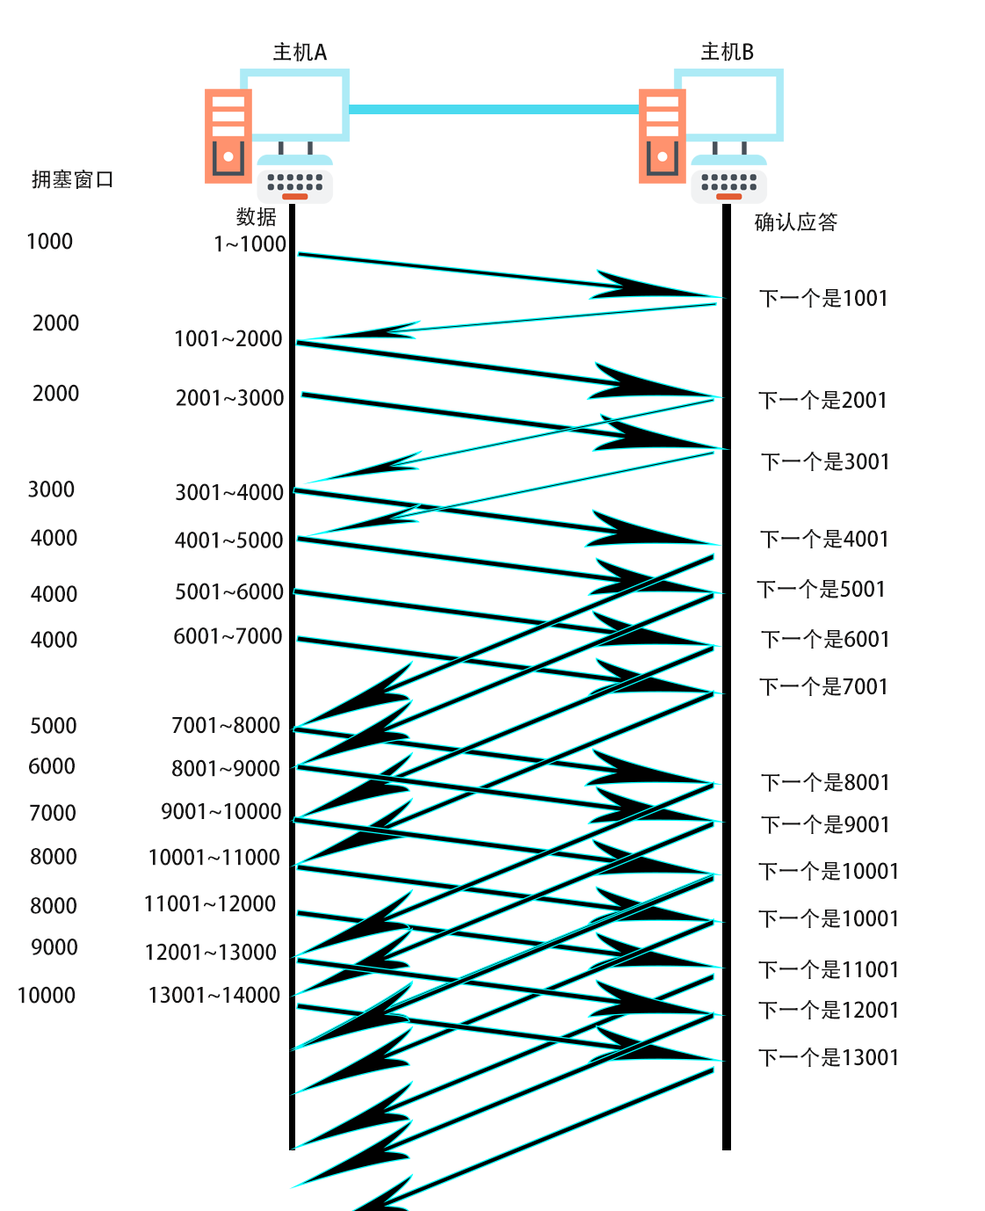
<style>
.page{position:relative;width:985px;height:1211px;background:#ffffff}
.page>*{position:absolute;margin:0}
.t1{font:21.1px "AdobeHeitiStd-Regular";color:#151414}
</style>
<div class="page">
<p class="t1" style="left:273px;top:41px;width:55px;height:21px">主机A</p>
<p class="t1" style="left:701px;top:41px;width:53px;height:21px">主机B</p>
<p class="t1" style="left:32px;top:169px;width:80px;height:20px">拥塞窗口</p>
<p class="t1" style="left:235px;top:206px;width:41px;height:21px">数据</p>
<p class="t1" style="left:754px;top:212px;width:83px;height:20px">确认应答</p>
<p class="t1" style="left:27px;top:232px;width:46px;height:18px">1000</p>
<p class="t1" style="left:214px;top:235px;width:72px;height:17px">1~1000</p>
<p class="t1" style="left:759px;top:287px;width:127px;height:21px">下一个是1001</p>
<p class="t1" style="left:33px;top:314px;width:46px;height:17px">2000</p>
<p class="t1" style="left:175px;top:329px;width:107px;height:18px">1001~2000</p>
<p class="t1" style="left:33px;top:384px;width:46px;height:18px">2000</p>
<p class="t1" style="left:176px;top:389px;width:108px;height:17px">2001~3000</p>
<p class="t1" style="left:758px;top:389px;width:127px;height:20px">下一个是2001</p>
<p class="t1" style="left:761px;top:451px;width:126px;height:20px">下一个是3001</p>
<p class="t1" style="left:28px;top:481px;width:47px;height:16px">3000</p>
<p class="t1" style="left:176px;top:483px;width:108px;height:18px">3001~4000</p>
<p class="t1" style="left:31px;top:529px;width:46px;height:17px">4000</p>
<p class="t1" style="left:175px;top:532px;width:108px;height:16px">4001~5000</p>
<p class="t1" style="left:760px;top:528px;width:127px;height:20px">下一个是4001</p>
<p class="t1" style="left:756px;top:578px;width:127px;height:20px">下一个是5001</p>
<p class="t1" style="left:31px;top:585px;width:46px;height:17px">4000</p>
<p class="t1" style="left:176px;top:583px;width:108px;height:17px">5001~6000</p>
<p class="t1" style="left:174px;top:627px;width:108px;height:17px">6001~7000</p>
<p class="t1" style="left:761px;top:628px;width:126px;height:20px">下一个是6001</p>
<p class="t1" style="left:31px;top:631px;width:46px;height:17px">4000</p>
<p class="t1" style="left:759px;top:676px;width:127px;height:20px">下一个是7001</p>
<p class="t1" style="left:31px;top:717px;width:45px;height:17px">5000</p>
<p class="t1" style="left:172px;top:716px;width:108px;height:18px">7001~8000</p>
<p class="t1" style="left:29px;top:757px;width:46px;height:17px">6000</p>
<p class="t1" style="left:172px;top:759px;width:107px;height:18px">8001~9000</p>
<p class="t1" style="left:761px;top:771px;width:126px;height:21px">下一个是8001</p>
<p class="t1" style="left:30px;top:804px;width:46px;height:17px">7000</p>
<p class="t1" style="left:162px;top:802px;width:119px;height:18px">9001~10000</p>
<p class="t1" style="left:761px;top:814px;width:126px;height:20px">下一个是9001</p>
<p class="t1" style="left:31px;top:848px;width:45px;height:17px">8000</p>
<p class="t1" style="left:149px;top:848px;width:130px;height:17px">10001~11000</p>
<p class="t1" style="left:758px;top:860px;width:139px;height:20px">下一个是10001</p>
<p class="t1" style="left:31px;top:897px;width:45px;height:17px">8000</p>
<p class="t1" style="left:145px;top:894px;width:131px;height:18px">11001~12000</p>
<p class="t1" style="left:758px;top:908px;width:139px;height:20px">下一个是10001</p>
<p class="t1" style="left:32px;top:938px;width:45px;height:17px">9000</p>
<p class="t1" style="left:146px;top:943px;width:130px;height:17px">12001~13000</p>
<p class="t1" style="left:758px;top:959px;width:139px;height:20px">下一个是11001</p>
<p class="t1" style="left:18px;top:986px;width:58px;height:17px">10000</p>
<p class="t1" style="left:149px;top:986px;width:131px;height:17px">13001~14000</p>
<p class="t1" style="left:758px;top:999px;width:139px;height:20px">下一个是12001</p>
<p class="t1" style="left:758px;top:1046px;width:139px;height:21px">下一个是13001</p>
</div>
